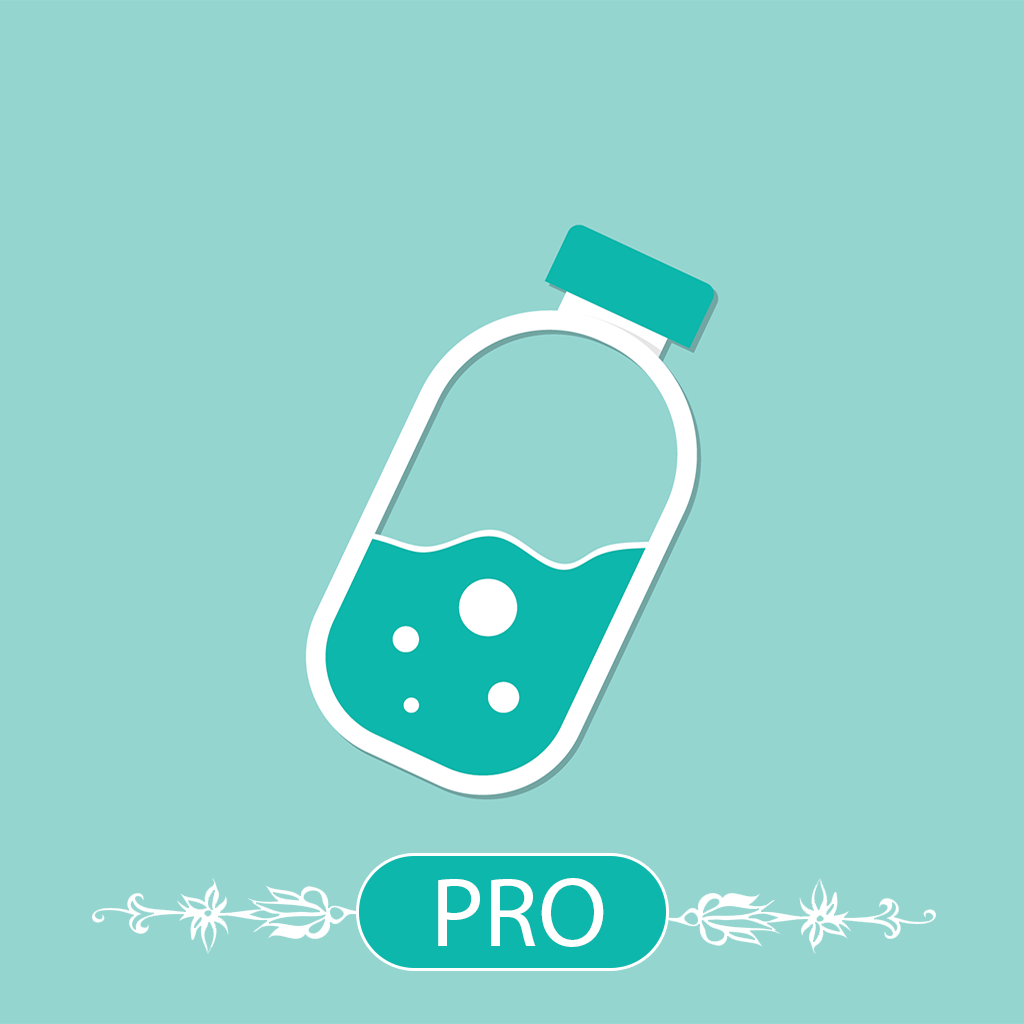
<style>
.page{position:relative;width:1024px;height:1024px;background:#94d5d0}
.page>*{position:absolute;margin:0}
.t1{font:100px "MyriadPro-Regular";color:#ffffff}
</style>
<div class="page">
<p class="t1" style="left:438px;top:878px;width:166px;height:69px">PRO</p>
</div>
